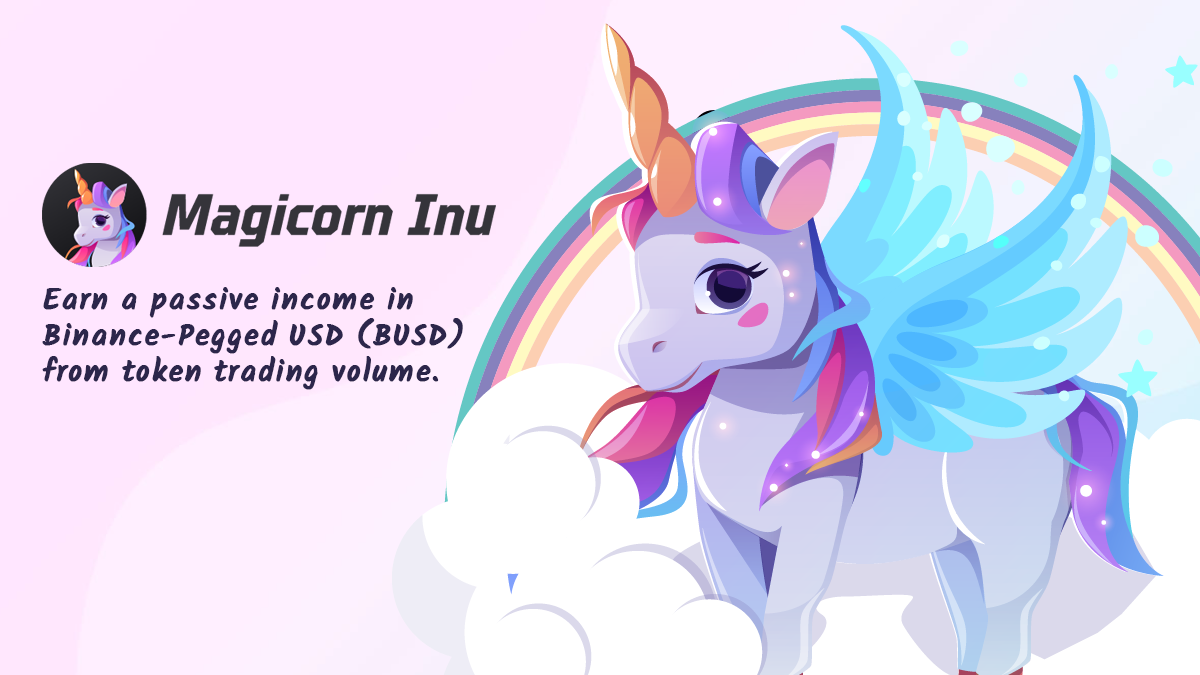
<style>
.page{position:relative;width:1200px;height:675px}
.page>*{position:absolute;margin:0}
.t1{font:30px/36px "Kalam-Bold";letter-spacing:0.05em;color:#2c264b;font-weight:bold}
</style>
<div class="page">
<p class="t1" style="left:42px;top:287px;width:421px;height:103px">Earn a passive income in <br>Binance-Pegged USD (BUSD) <br>from token trading volume.</p>
</div>
